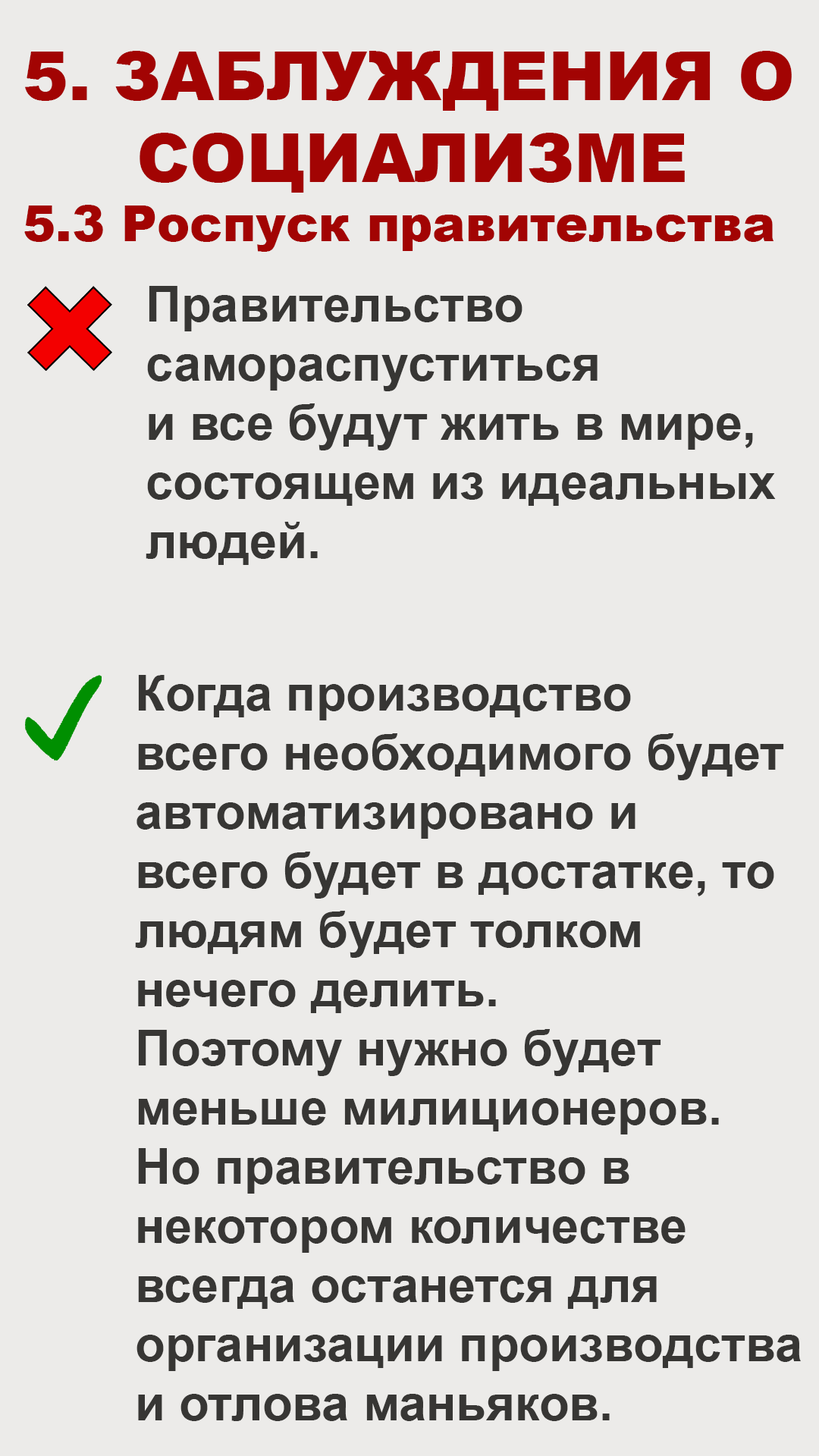
<style>
.page{position:relative;width:819px;height:1456px;background:#ecebe9}
.page>*{position:absolute;margin:0}
.t1{font:68.2px "Arial-Black";color:#a20403}
.t2{font:49.3px "Arial-Black";color:#a20403}
.t3{font:49.3px "Arial-BoldMT";color:#373634}
</style>
<div class="page">
<p class="t1" style="left:24px;top:51px;width:768px;height:201px">5. ЗАБЛУЖДЕНИЯ О <br>     СОЦИАЛИЗМЕ<br><span class="t2">5.3 Роспуск правительства</span></p>
<p class="t3" style="left:146px;top:286px;width:630px;height:279px">Правительство<br>самораспуститься<br>и все будут жить в мире,<br>состоящем из идеальных<br>людей.</p>
<p class="t3" style="left:135px;top:675px;width:666px;height:746px">Когда производство<br>всего необходимого будет<br>автоматизировано и <br>всего будет в достатке, то<br>людям будет толком<br>нечего делить.<br>Поэтому нужно будет<br>меньше милиционеров.<br>Но правительство в <br>некотором количестве<br>всегда останется для <br>организации производства<br>и отлова маньяков.</p>
</div>
